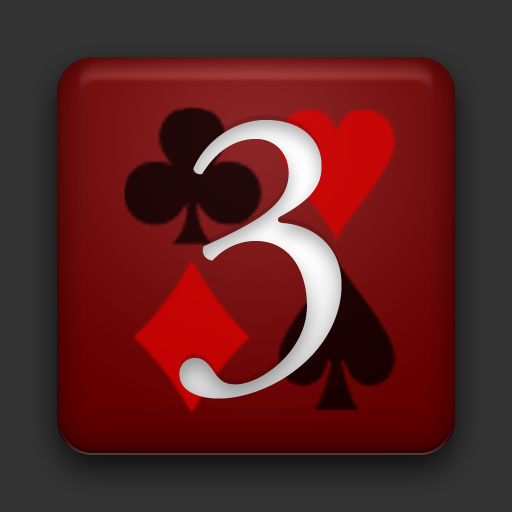
<style>
.page{position:relative;width:512px;height:512px;background:#333333}
.page>*{position:absolute;margin:0}
.t1{font:400px "AGaramondPro-Regular"}
</style>
<div class="page">
<p class="t1" style="left:179px;top:120px;width:163px;height:279px">3</p>
</div>
